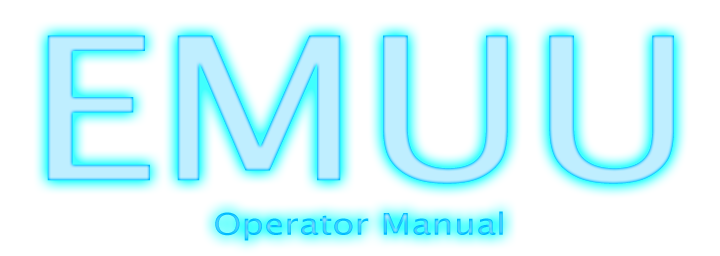
<style>
.page{position:relative;width:720px;height:256px;background:#ffffff}
.page>*{position:absolute;margin:0}
.t1{font:200px "LucidaSans";color:#bfeeff;scale:1.2 1}
.t2{font:30px "LucidaSans";scale:1.2 1}
</style>
<div class="page">
<p class="t1" style="left:47px;top:35px;width:627px;height:149px">EMUU</p>
<p class="t2" style="left:215px;top:211px;width:288px;height:30px">Operator Manual</p>
</div>
